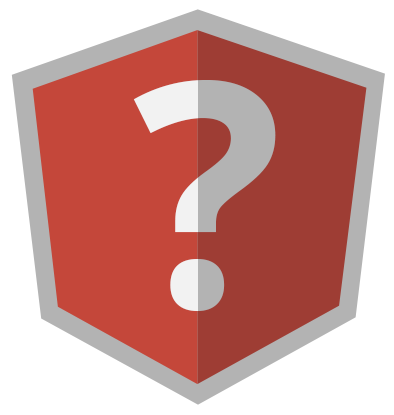
<style>
.page{position:relative;width:394px;height:415px;background:#ffffff}
.page>*{position:absolute;margin:0}
.t1{font:313.9px "OpenSans-Bold"}
</style>
<div class="page">
<p class="t1" style="left:133px;top:80px;width:143px;height:231px">?</p>
</div>
